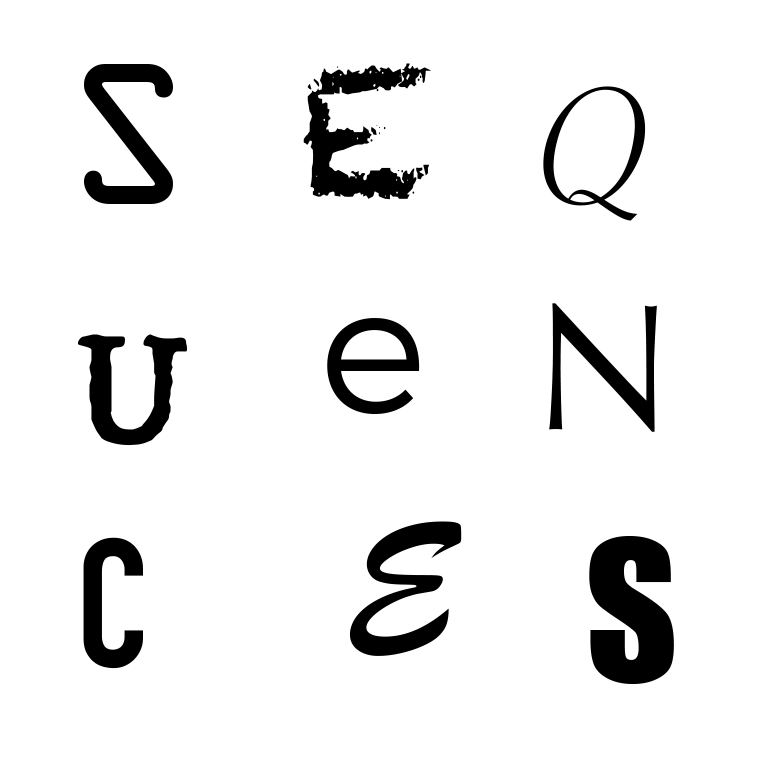
<style>
.page{position:relative;width:768px;height:768px;background:#ffffff}
.page>*{position:absolute;margin:0}
.t1{font:180px "OCRAStd";color:#000000}
.t2{font:180px "Chalkduster";color:#000000}
.t3{font:180px "SavoyeLetPlain";color:#000000}
.t4{font:180px "Optima-Regular";color:#000000}
.t5{font:180px "TruenoLt";color:#000000}
.t6{font:180px "Trattatello";color:#000000}
.t7{font:180px "BrushScriptMT";color:#000000}
.t8{font:180px "DINCondensed-Bold";color:#000000}
.t9{font:180px "Impact";color:#000000}
</style>
<div class="page">
<p class="t1" style="left:84px;top:64px;width:89px;height:140px">S</p>
<p class="t2" style="left:303px;top:63px;width:128px;height:137px">E</p>
<p class="t3" style="left:543px;top:86px;width:103px;height:135px">Q</p>
<p class="t4" style="left:549px;top:303px;width:108px;height:129px">N</p>
<p class="t5" style="left:327px;top:318px;width:93px;height:96px">e</p>
<p class="t6" style="left:77px;top:334px;width:110px;height:112px">U</p>
<p class="t7" style="left:349px;top:521px;width:113px;height:135px">E</p>
<p class="t8" style="left:83px;top:537px;width:60px;height:132px">C</p>
<p class="t9" style="left:589px;top:536px;width:85px;height:148px">S</p>
</div>
